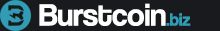
<style>
.page{position:relative;width:220px;height:31px;background:#181a1d}
.page>*{position:absolute;margin:0}
.t1{font:32px "CoolveticaRg-Regular";color:#ffffff}
.t2{font:18px "CoolveticaRg-Regular";color:#319db5}
</style>
<div class="page">
<p class="t1" style="left:39px;top:3px;width:152px;height:23px">Burstcoin<span class="t2">.biz</span></p>
</div>
